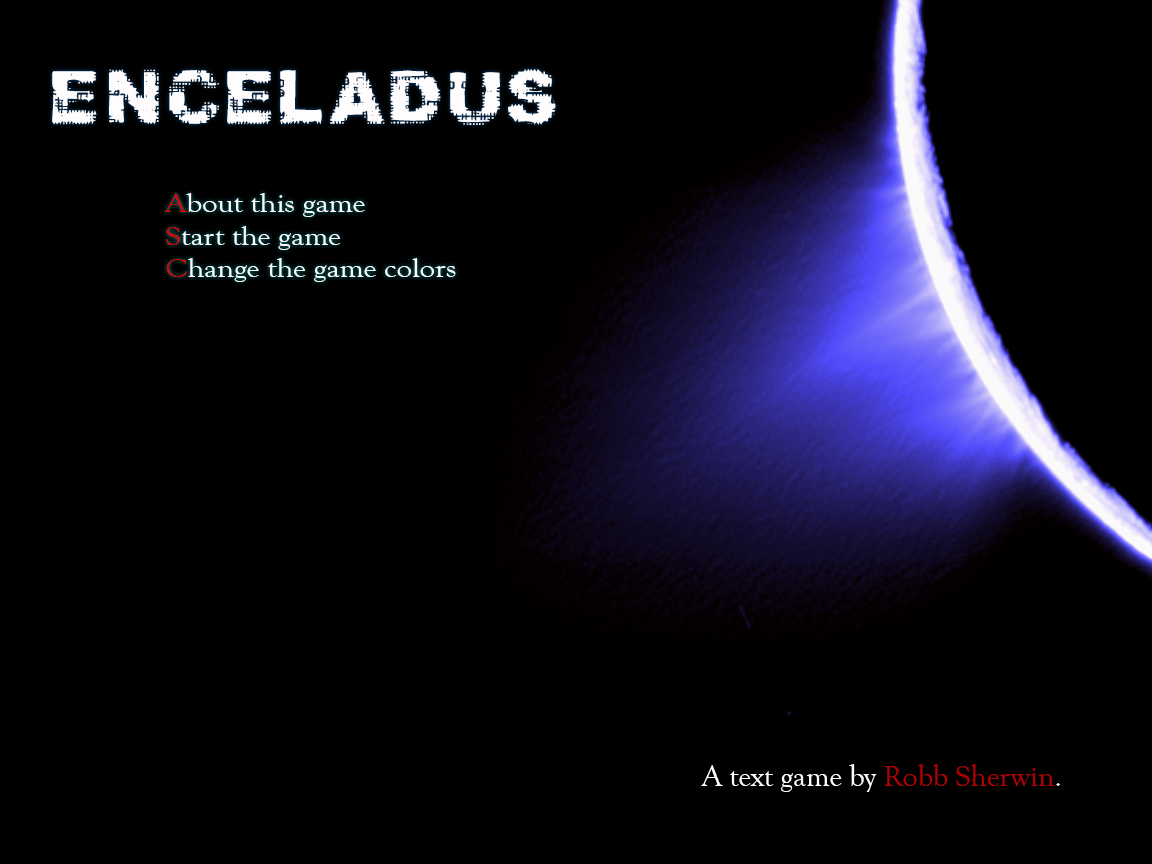
<style>
.page{position:relative;width:1152px;height:864px;background:#000000}
.page>*{position:absolute;margin:0}
.t1{font:60px "Prefix";color:#fefcfc}
.t2{font:26.8px "GoudyOldStyleT-Regular";color:#fefcfc;scale:1.15 1}
.t3{font:26.8px "GoudyOldStyleT-Regular";color:#d00707;scale:1.15 1}
.t4{font:26.8px "GoudyOldStyleT-Regular";color:#d60404;scale:1.15 1}
.t5{font:26.8px "GoudyOldStyleT-Regular";color:#d90505;scale:1.15 1}
.t6{font:30px "GoudyOldStyleT-Regular";color:#fefcfc}
.t7{font:30px "GoudyOldStyleT-Regular";color:#ac0202}
.t8{font:30px "GoudyOldStyleT-Regular";color:#fdfdfd}
</style>
<div class="page">
<p class="t1" style="left:52px;top:69px;width:504px;height:56px">ENCELADUS</p>
<p class="t2" style="left:164px;top:193px;width:292px;height:89px;text-align:right"><span class="t3">A</span>bout this game<br><span class="t4">S</span>tart the game <br><span class="t5">C</span>hange the game colors</p>
<p class="t6" style="left:701px;top:764px;width:359px;height:28px">A text game by <span class="t7">Robb Sherwin</span><span class="t8">.</span></p>
</div>
